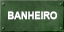
<style>
.page{position:relative;width:64px;height:32px}
.page>*{position:absolute;margin:0}
.t1{font:10.5px "Arial-BoldMT";letter-spacing:-0.04em;color:#ffffff;font-weight:bold;scale:0.9 1}
</style>
<div class="page">
<p class="t1" style="left:8px;top:11px;width:49px;height:9px">BANHEIRO</p>
</div>
